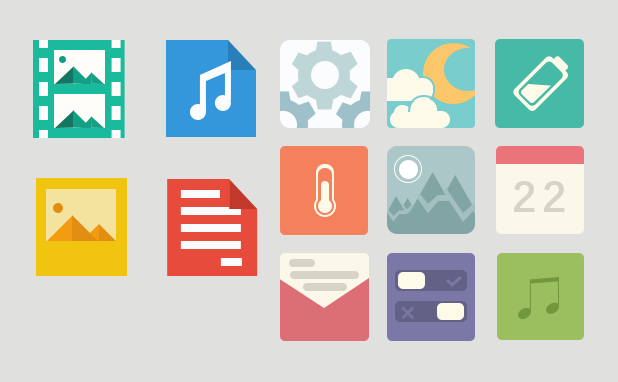
<style>
.page{position:relative;width:618px;height:382px;background:#e0e0df}
.page>*{position:absolute;margin:0}
.t1{font:44px "DengXian-Bold";letter-spacing:0.12em;color:#d7d3c5}
</style>
<div class="page">
<p class="t1" style="left:514px;top:181px;width:51px;height:31px">22</p>
</div>
